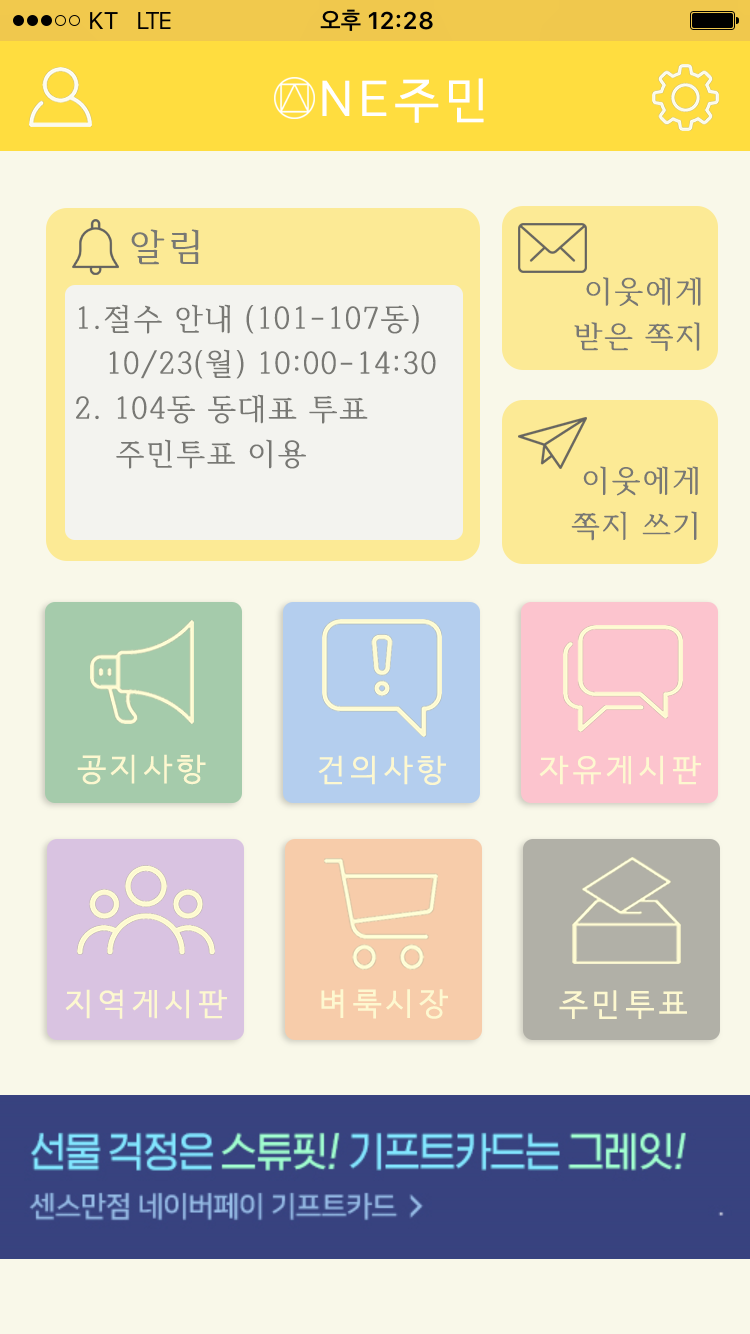
<style>
.page{position:relative;width:750px;height:1334px;background:#f9f8e9}
.page>*{position:absolute;margin:0}
.t1{font:48px "HCRDotum";letter-spacing:0.075em;color:#ffffff;text-transform:uppercase;font-weight:bold}
.t2{font:37px "HCRBatang";letter-spacing:0.075em;color:#787874;text-transform:uppercase;font-weight:bold}
.t3{font:30px/45px "HCRBatang";letter-spacing:0.015em;color:#787874;text-transform:uppercase;font-weight:bold}
.t4{font:31px "HCRDotum";letter-spacing:0.075em;color:#fdf8d0;text-transform:uppercase;font-weight:bold}
</style>
<div class="page">
<p class="t1" style="left:322px;top:78px;width:162px;height:45px">ne주민</p>
<p class="t2" style="left:131px;top:229px;width:68px;height:36px">알림</p>
<p class="t3" style="left:574px;top:277px;width:127px;height:74px;text-align:right">이웃에게<br>받은 쪽지</p>
<p class="t3" style="left:76px;top:304px;width:360px;height:165px">1.절수 안내 (101-107동)<br>   10/23(월) 10:00-14:30<br>2. 104동 동대표 투표<br>    주민투표 이용</p>
<p class="t3" style="left:571px;top:466px;width:127px;height:75px;text-align:right">이웃에게<br>쪽지 쓰기</p>
<p class="t4" style="left:77px;top:754px;width:129px;height:31px">공지사항</p>
<p class="t4" style="left:318px;top:755px;width:128px;height:30px">건의사항</p>
<p class="t4" style="left:539px;top:755px;width:162px;height:30px">자유게시판</p>
<p class="t4" style="left:65px;top:989px;width:162px;height:30px">지역게시판</p>
<p class="t4" style="left:321px;top:989px;width:127px;height:30px">벼룩시장</p>
<p class="t4" style="left:559px;top:990px;width:128px;height:29px">주민투표</p>
</div>
